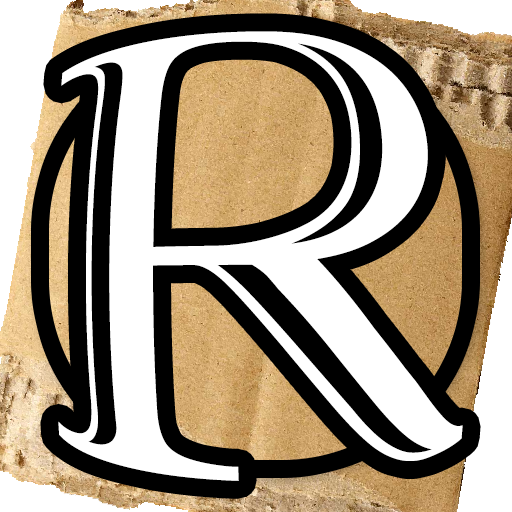
<style>
.page{position:relative;width:512px;height:512px;background:#ffffff}
.page>*{position:absolute;margin:0}
.t1{font:499.5px "ImprintMT-Shadow";color:#ffffff;font-weight:bold;scale:1.04 1}
</style>
<div class="page">
<p class="t1" style="left:58px;top:31px;width:405px;height:450px">R</p>
</div>
